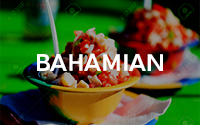
<style>
.page{position:relative;width:200px;height:125px}
.page>*{position:absolute;margin:0}
.t1{font:24px "Gentleman800-Bold";color:#ffffff;text-transform:uppercase}
</style>
<div class="page">
<p class="t1" style="left:37px;top:54px;width:126px;height:17px">Bahamian</p>
</div>
